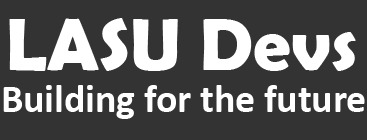
<style>
.page{position:relative;width:367px;height:140px;background:#333333}
.page>*{position:absolute;margin:0}
.t1{font:75px "BerlinSansFBDemi-Bold";color:#ffffff}
.t2{font:39.6px "Calibri-Bold";color:#ffffff}
</style>
<div class="page">
<p class="t1" style="left:9px;top:18px;width:347px;height:53px">LASU Devs</p>
<p class="t2" style="left:3px;top:85px;width:362px;height:34px">Building for the future</p>
</div>
